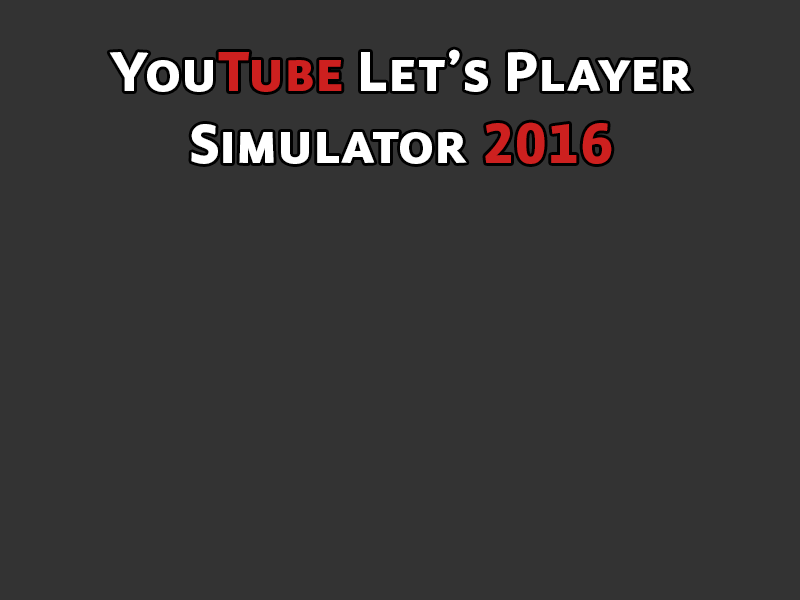
<style>
.page{position:relative;width:800px;height:600px;background:#333333}
.page>*{position:absolute;margin:0}
.t1{font:60px "PlusSansExtraBold-SC";letter-spacing:0.01em;color:#ffffff}
.t2{font:60px "PlusSansExtraBold-SC";letter-spacing:0.01em;color:#cd201f}
</style>
<div class="page">
<p class="t1" style="left:109px;top:49px;width:583px;height:115px;text-align:center">You<span class="t2">Tube</span> Let’s Player<br>Simulator <span class="t2">2016</span></p>
</div>
